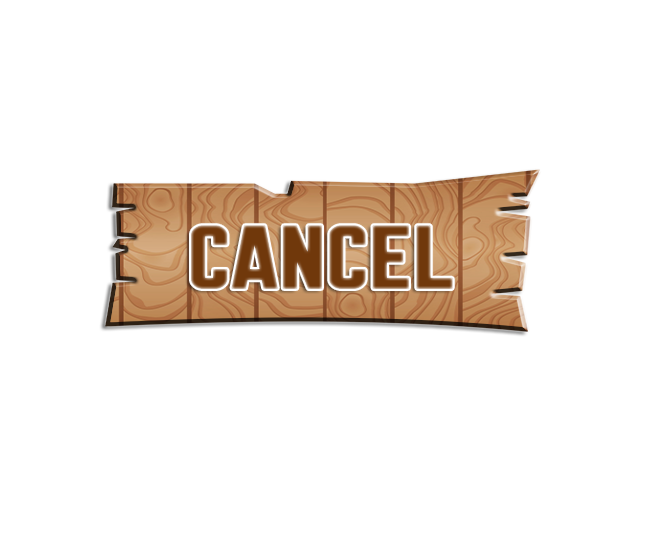
<style>
.page{position:relative;width:650px;height:536px;background:#ffffff}
.page>*{position:absolute;margin:0}
.t1{font:70px "BrewmasterGothicRound";color:#70380b;scale:1.26 1}
</style>
<div class="page">
<p class="t1" style="left:191px;top:225px;width:262px;height:64px">cancel</p>
</div>
